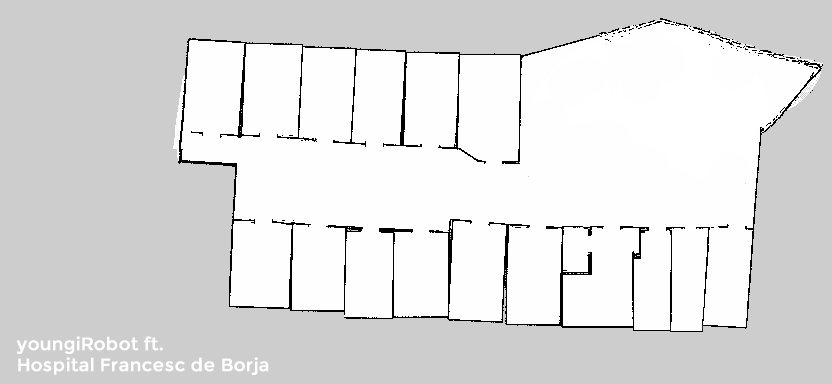
<style>
.page{position:relative;width:832px;height:384px;background:#cdcdcd}
.page>*{position:absolute;margin:0}
.t1{font:18px/21.3px "Montserrat-Regular";color:#fefefe;font-weight:bold}
.t2{font:18px/159.3px "Montserrat-Regular";color:#fefefe;font-weight:bold}
</style>
<div class="page">
<p class="t1" style="left:16px;top:336px;width:253px;height:39px"><span class="t2">youngiRobot ft.<br></span>Hospital Francesc de Borja</p>
</div>
